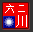
<style>
.page{position:relative;width:33px;height:32px;background:#f20000}
.page>*{position:absolute;margin:0}
.t1{font:10.4px "SimSun";color:#ffffff}
.t2{font:11.7px "SimSun";color:#ffffff}
</style>
<div class="page">
<p class="t1" style="left:5px;top:4px;width:20px;height:9px">六二</p>
<p class="t2" style="left:16px;top:15px;width:11px;height:12px">川</p>
</div>
